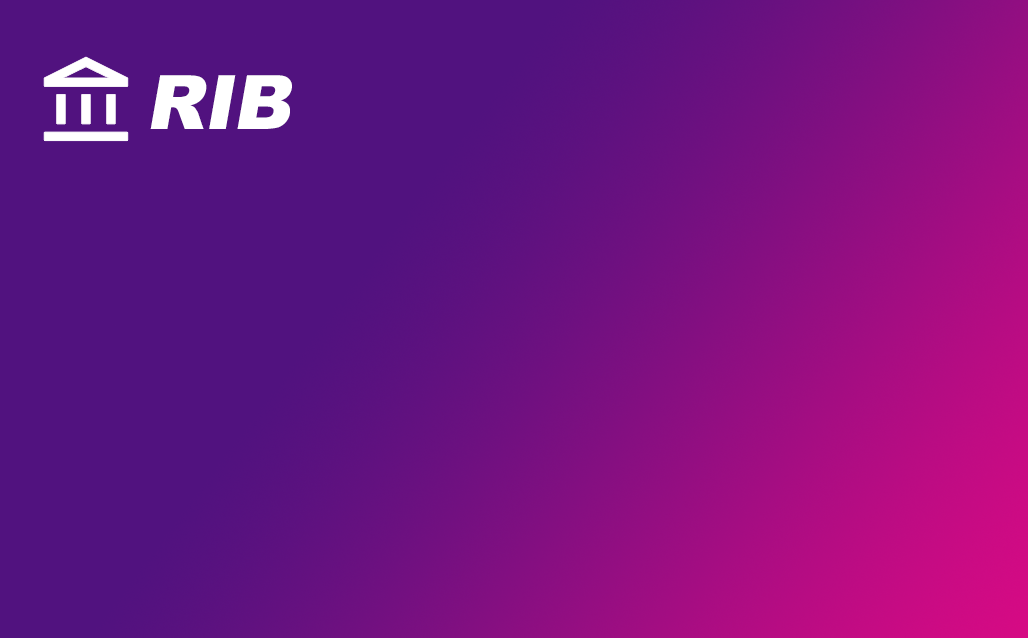
<style>
.page{position:relative;width:1028px;height:638px;background:#51127f}
.page>*{position:absolute;margin:0}
.t1{font:75px "Arial-Black";color:#ffffff;font-style:italic}
</style>
<div class="page">
<p class="t1" style="left:150px;top:75px;width:142px;height:54px">RIB</p>
</div>
